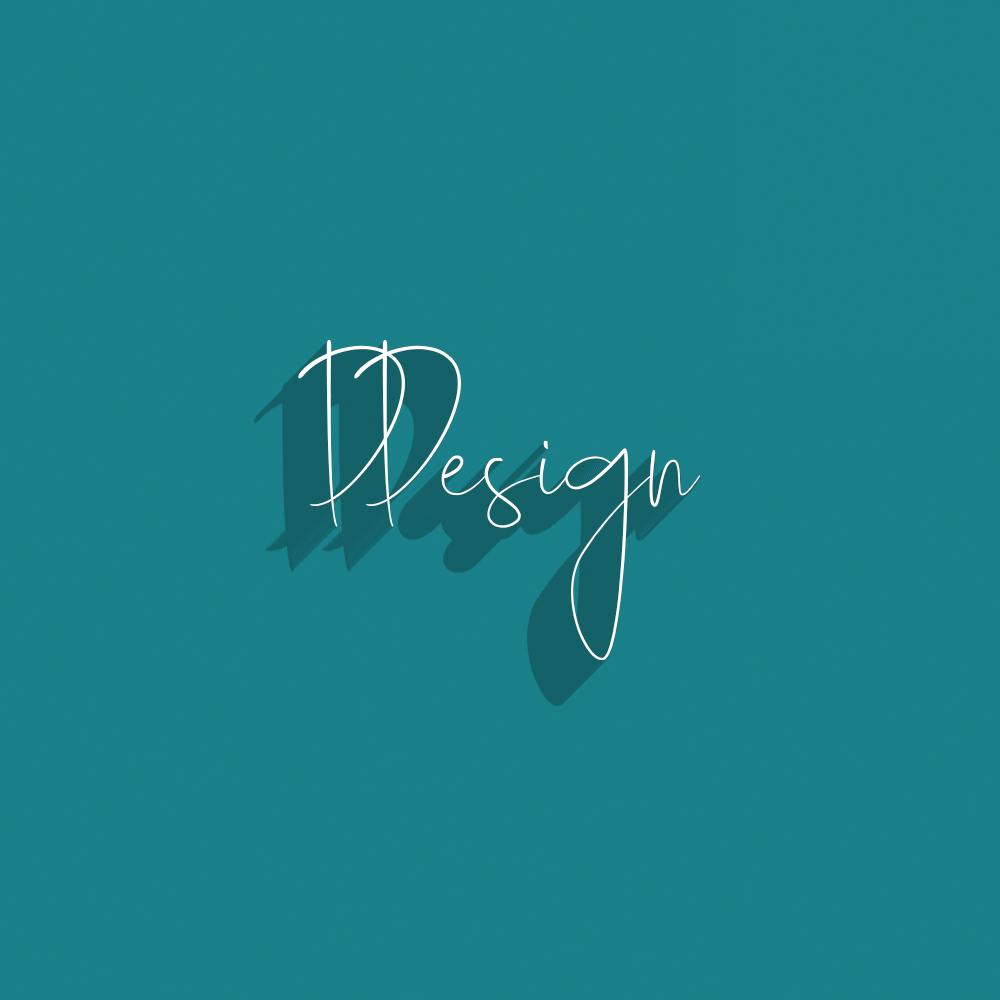
<style>
.page{position:relative;width:1000px;height:1000px;background:#1a8089}
.page>*{position:absolute;margin:0}
.t1{font:233.3px "Youthness-Regular";color:#ffffff}
</style>
<div class="page">
<p class="t1" style="left:298px;top:340px;width:402px;height:320px">DDesign</p>
</div>
